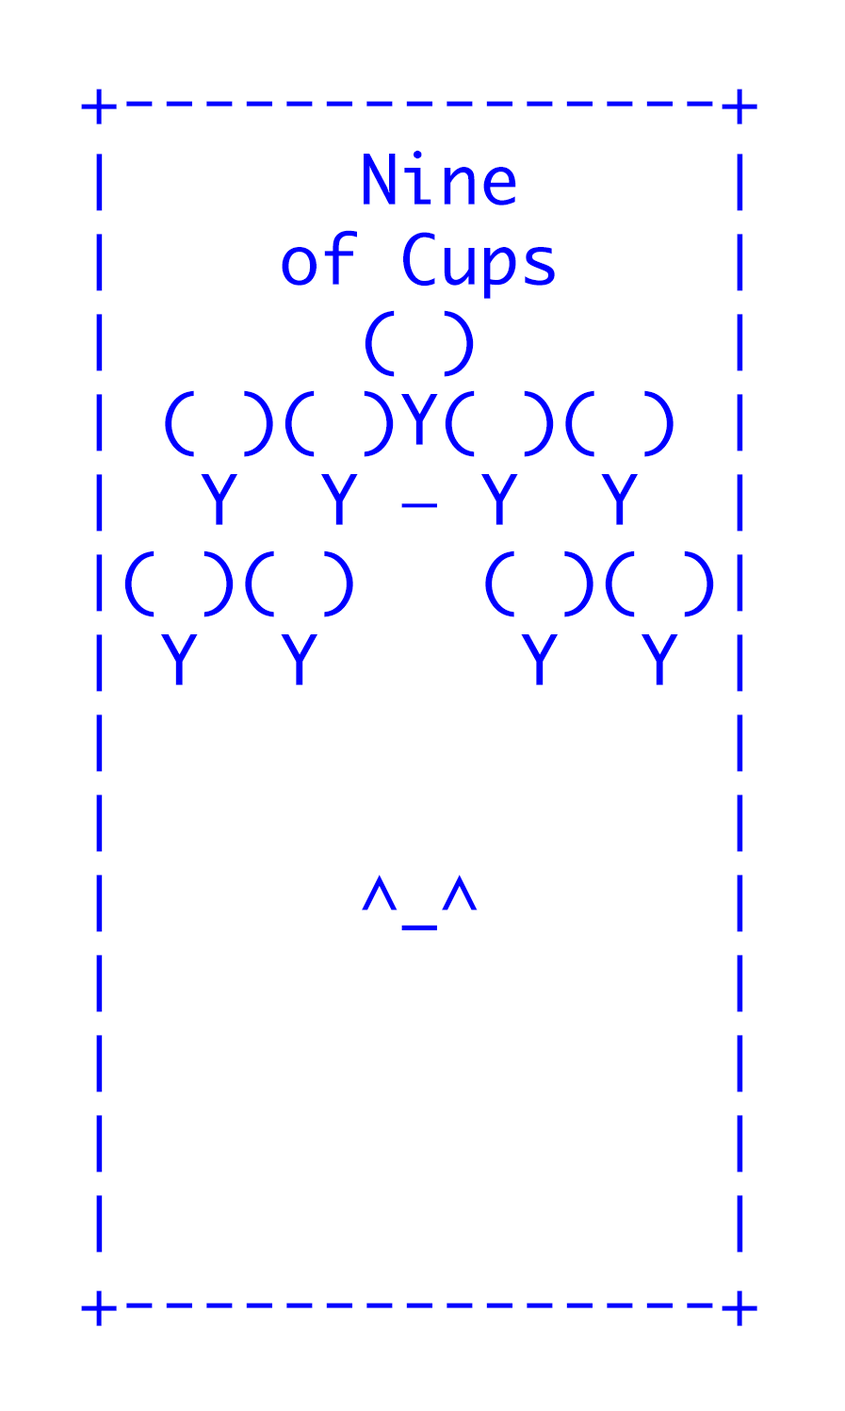
<style>
.page{position:relative;width:845px;height:1411px;background:#ffffff}
.page>*{position:absolute;margin:0}
.t1{font:66.7px "Monaco";color:#0000ff}
</style>
<div class="page">
<p class="t1" style="left:81px;top:89px;width:677px;height:1237px">+---------------+<br>│      Nine     │<br>│    of Cups    │<br>│      ( )      │<br>│ ( )( )Y( )( ) │<br>│  Y  Y — Y  Y  │<br>│( )( )   ( )( )│<br>│ Y  Y     Y  Y │ <br>│               │ <br>│               │<br>│      ^_^      │ <br>│               │ <br>│               │<br>│               │<br>│               │<br>+---------------+</p>
</div>
